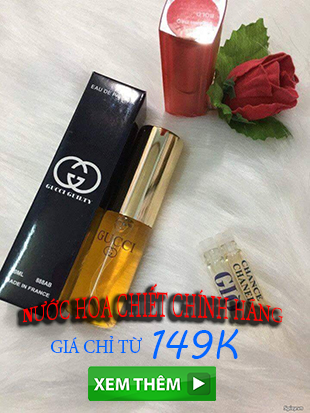
<style>
.page{position:relative;width:310px;height:413px}
.page>*{position:absolute;margin:0}
.t1{font:19.6px/11px "MinionPro-Regular";letter-spacing:-0.02em;color:#ff0000;text-transform:uppercase;scale:0.92 1}
.t2{font:19.6px/11px "BodoniMT-Bold";letter-spacing:-0.02em;color:#ff0000;text-transform:uppercase;scale:0.92 1}
.t3{font:40.8px "MVBoli";letter-spacing:-0.02em;color:#0066ff;text-transform:uppercase;scale:0.92 1}
.t4{font:19.6px "MinionPro-Regular";letter-spacing:-0.02em;color:#0066ff;text-transform:uppercase;scale:0.92 1}
</style>
<div class="page">
<p class="t1" style="left:22px;top:283px;width:261px;height:40px"><span class="t2">N</span>ước hoa chiết chính hãng</p>
<p class="t3" style="left:153px;top:329px;width:86px;height:30px">149k</p>
<p class="t4" style="left:50px;top:335px;width:92px;height:18px">giá chỉ từ</p>
</div>
